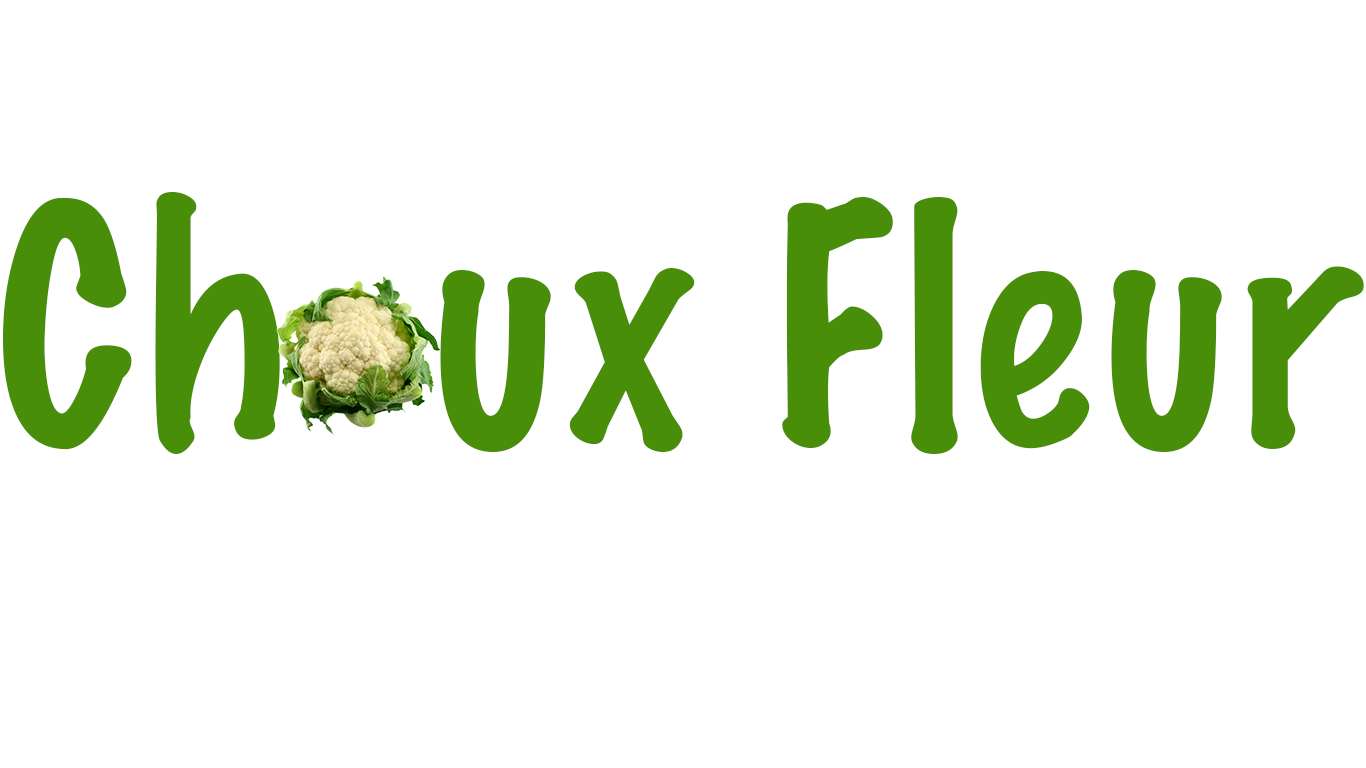
<style>
.page{position:relative;width:1366px;height:768px;background:#ffffff}
.page>*{position:absolute;margin:0}
.t1{font:300px "MarkerFelt-Thin";color:#488e08}
</style>
<div class="page">
<p class="t1" style="left:3px;top:192px;width:1361px;height:262px">Ch  ux Fleur</p>
</div>
